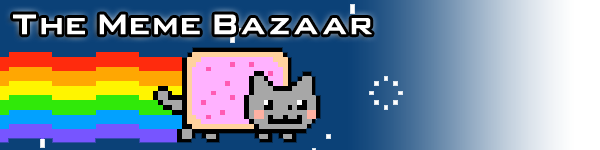
<style>
.page{position:relative;width:600px;height:150px}
.page>*{position:absolute;margin:0}
.t1{font:48px "BankGothic-Medium-BT";color:#ffffff;font-weight:bold}
</style>
<div class="page">
<p class="t1" style="left:13px;top:14px;width:359px;height:21px">The Meme Bazaar</p>
</div>
